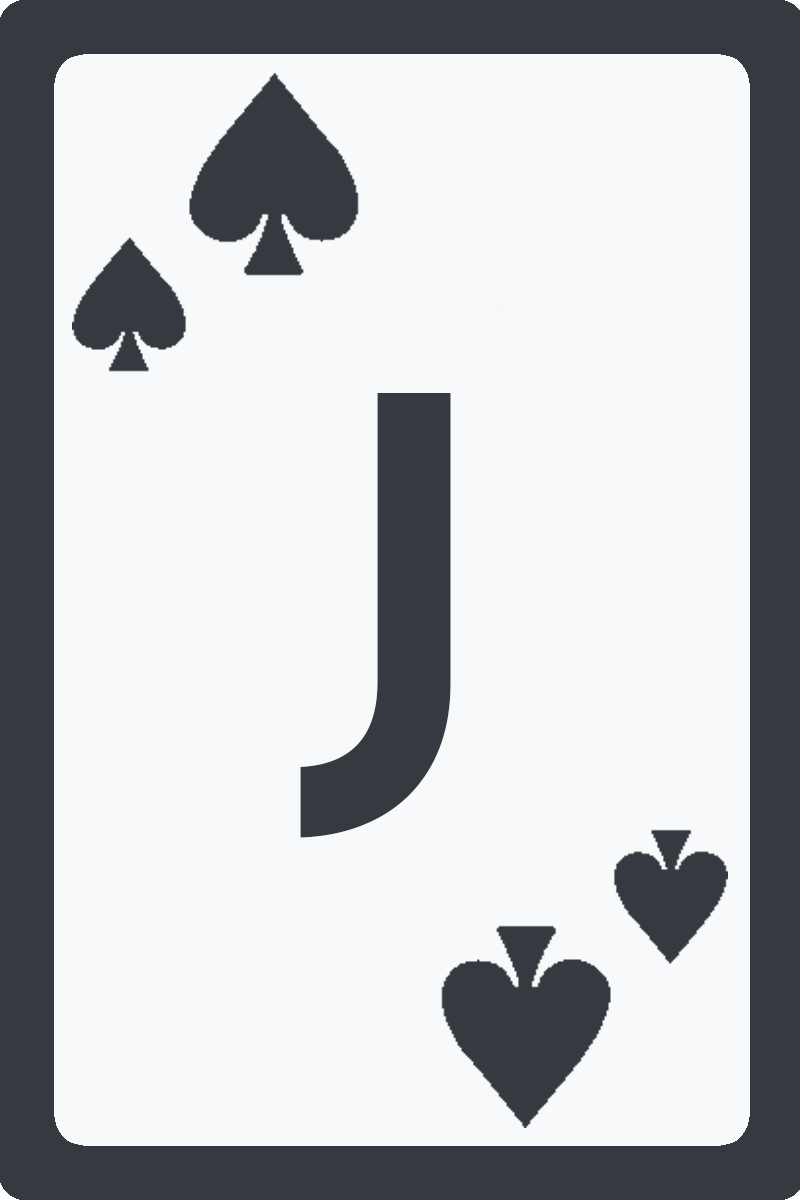
<style>
.page{position:relative;width:800px;height:1200px;background:#f8f9fa}
.page>*{position:absolute;margin:0}
.t1{font:500px "JosefinSans-Bold";color:#343a40}
</style>
<div class="page">
<p class="t1" style="left:300px;top:393px;width:151px;height:445px">J</p>
</div>
